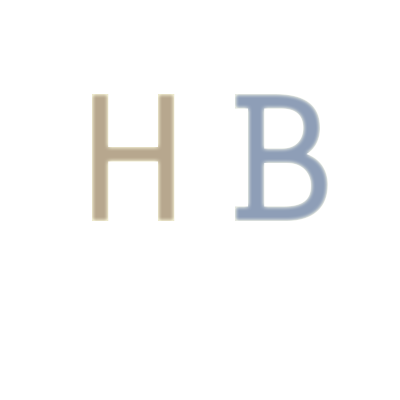
<style>
.page{position:relative;width:400px;height:400px;background:#ffffff}
.page>*{position:absolute;margin:0}
.t1{font:243.3px "OratorStd";color:#b7a78e}
.t2{font:243.3px "OratorStd";color:#8e9eb7}
</style>
<div class="page">
<p class="t1" style="left:92px;top:94px;width:236px;height:127px">h<span class="t2">b</span></p>
</div>
